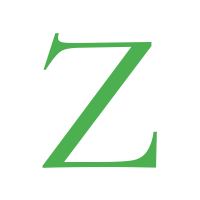
<style>
.page{position:relative;width:200px;height:200px;background:#ffffff}
.page>*{position:absolute;margin:0}
.t1{font:200px "STKaiti";color:#4caf50}
</style>
<div class="page">
<p class="t1" style="left:42px;top:33px;width:115px;height:135px">Z</p>
</div>
